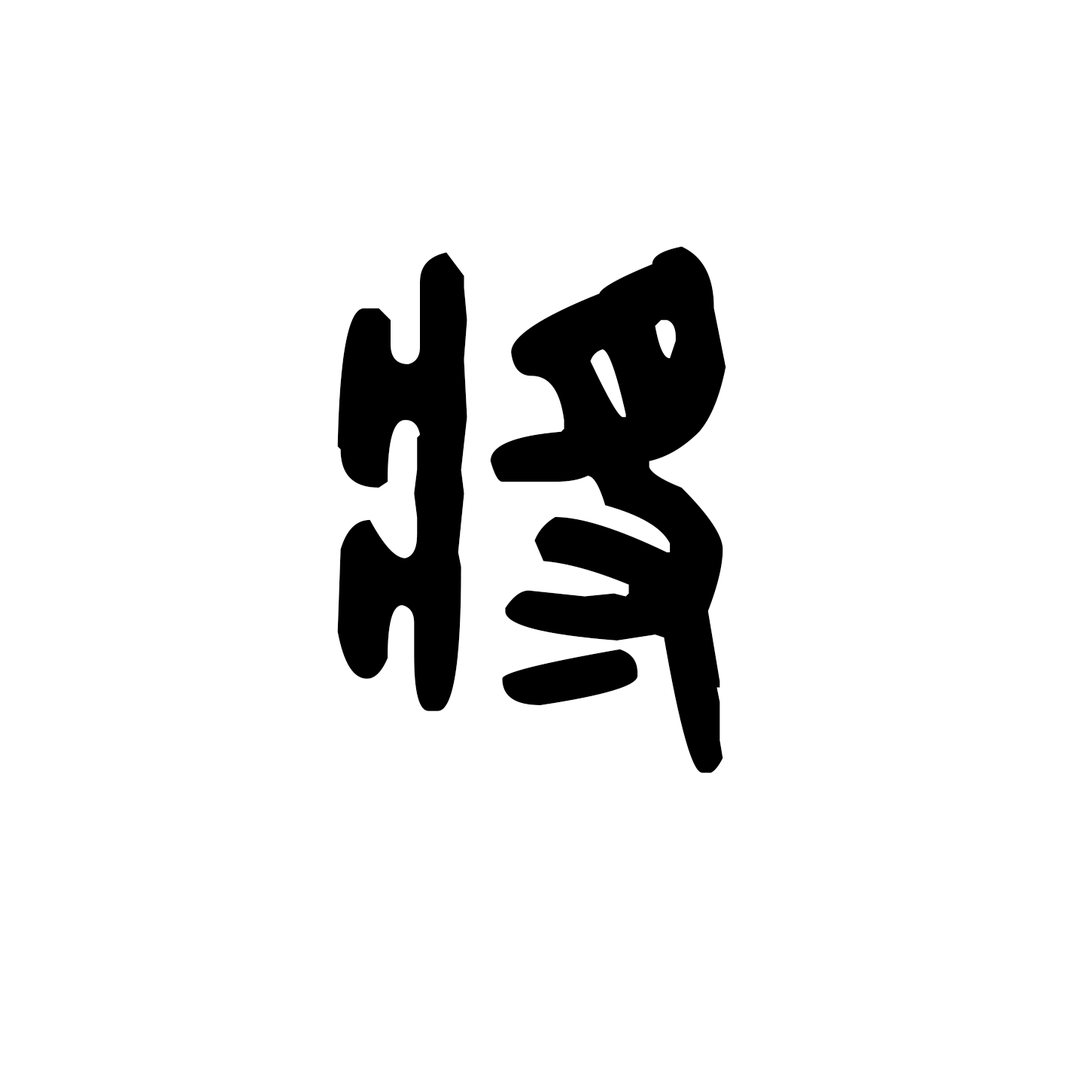
<style>
.page{position:relative;width:1092px;height:1092px;background:#ffffff}
.page>*{position:absolute;margin:0}
.t1{font:752.6px "½ðÎÄ´ó×­Ìå";color:#000000}
</style>
<div class="page">
<p class="t1" style="left:337px;top:246px;width:389px;height:527px">将</p>
</div>
